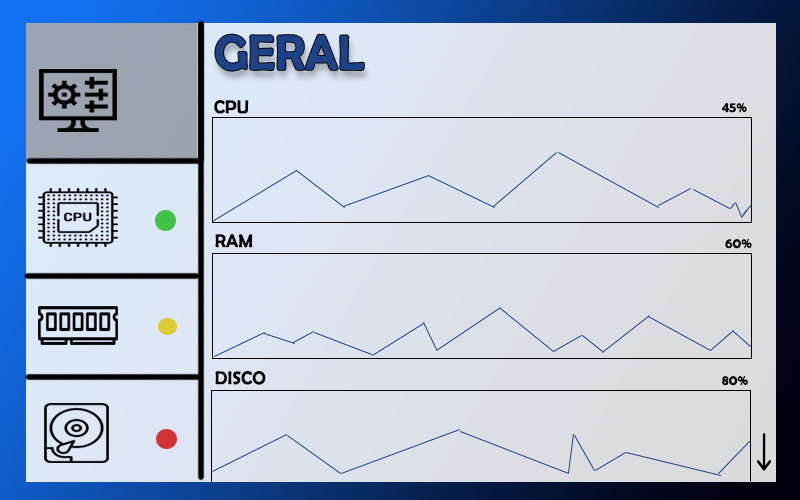
<style>
.page{position:relative;width:800px;height:500px}
.page>*{position:absolute;margin:0}
.t1{font:48px "BerlinSansFB-Reg";color:#1f4287;font-weight:bold}
.t2{font:18px "BerlinSansFB-Reg";color:#000000;font-weight:bold}
.t3{font:14px "BerlinSansFB-Reg";color:#000000;font-weight:bold}
</style>
<div class="page">
<p class="t1" style="left:215px;top:34px;width:149px;height:37px">GERAL</p>
<p class="t2" style="left:214px;top:100px;width:35px;height:14px">CPU</p>
<p class="t3" style="left:722px;top:103px;width:25px;height:10px">45%</p>
<p class="t2" style="left:215px;top:234px;width:38px;height:14px">RAM</p>
<p class="t3" style="left:725px;top:239px;width:27px;height:10px">60%</p>
<p class="t2" style="left:215px;top:371px;width:51px;height:14px">DISCO</p>
<p class="t3" style="left:722px;top:376px;width:26px;height:10px">80%</p>
</div>
